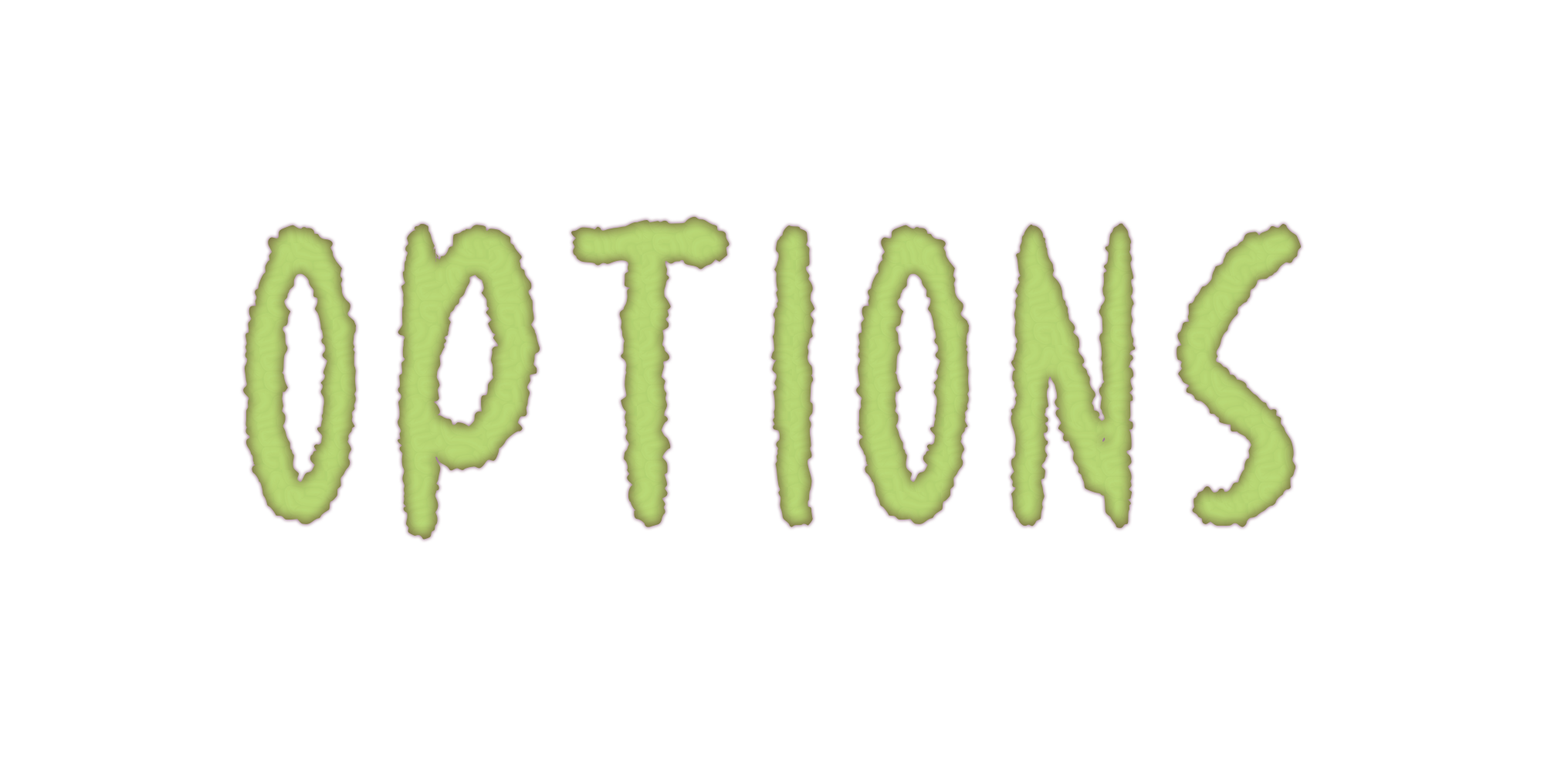
<style>
.page{position:relative;width:1544px;height:772px;background:#ffffff}
.page>*{position:absolute;margin:0}
.t1{font:321.7px "Metalien";letter-spacing:0.1em;color:#b7d974}
</style>
<div class="page">
<p class="t1" style="left:243px;top:216px;width:1059px;height:324px">Options</p>
</div>
